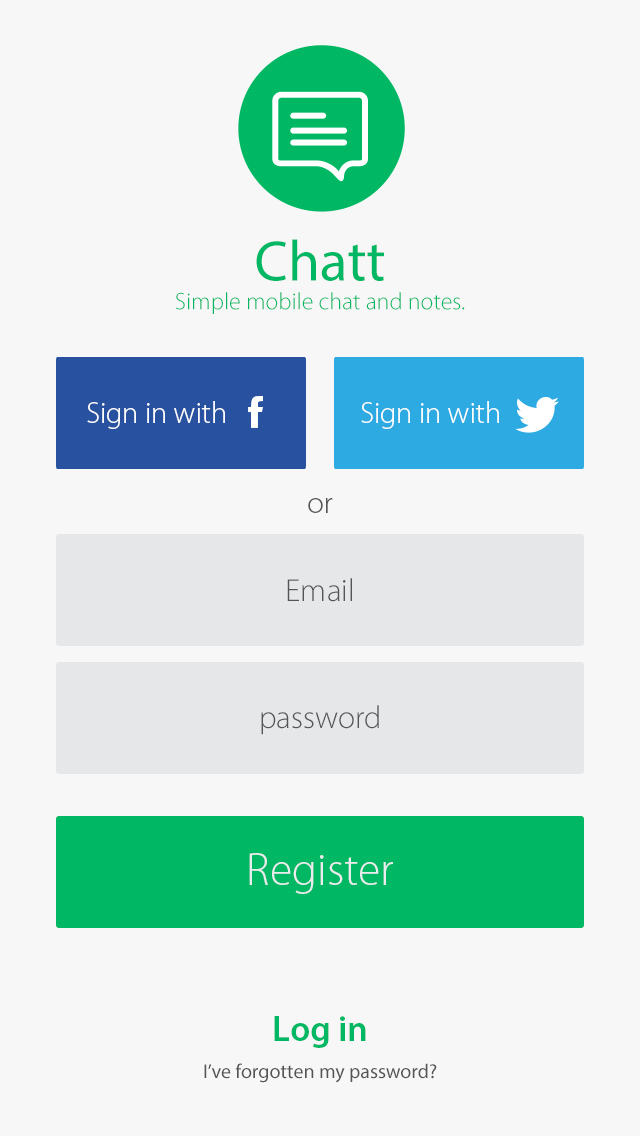
<style>
.page{position:relative;width:640px;height:1136px;background:#f7f7f7}
.page>*{position:absolute;margin:0}
.t1{font:24px "MyriadPro-Light";color:#00b863}
.t2{font:57.6px/70.4px "MyriadPro-Regular";color:#00b863}
.t3{font:30px "MyriadPro-Light";color:#ffffff}
.t4{font:30px "MyriadPro-Light";color:#565657}
.t5{font:32px "MyriadPro-Light";color:#555555}
.t6{font:46px "MyriadPro-Light";color:#e9ecee}
.t7{font:36px "MyriadPro-Semibold";color:#00b863}
.t8{font:20px "MyriadPro-Regular";color:#555555}
</style>
<div class="page">
<p class="t1" style="left:175px;top:239px;width:290px;height:75px;text-align:center"><span class="t2">Chatt<br></span>Simple mobile chat and notes.</p>
<p class="t3" style="left:87px;top:401px;width:138px;height:28px">Sign in with</p>
<p class="t3" style="left:361px;top:401px;width:138px;height:28px">Sign in with</p>
<p class="t4" style="left:308px;top:498px;width:25px;height:15px">or</p>
<p class="t5" style="left:287px;top:578px;width:65px;height:24px">Email</p>
<p class="t5" style="left:261px;top:705px;width:118px;height:30px">password</p>
<p class="t6" style="left:249px;top:853px;width:144px;height:41px">Register</p>
<p class="t7" style="left:274px;top:1016px;width:92px;height:32px">Log in</p>
<p class="t8" style="left:204px;top:1063px;width:233px;height:20px">I’ve forgotten my password?</p>
</div>
